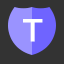
<style>
.page{position:relative;width:64px;height:64px;background:#333333}
.page>*{position:absolute;margin:0}
.t1{font:30px "Verdana";color:#ffffff;font-weight:bold}
</style>
<div class="page">
<p class="t1" style="left:23px;top:19px;width:20px;height:23px">T</p>
</div>
